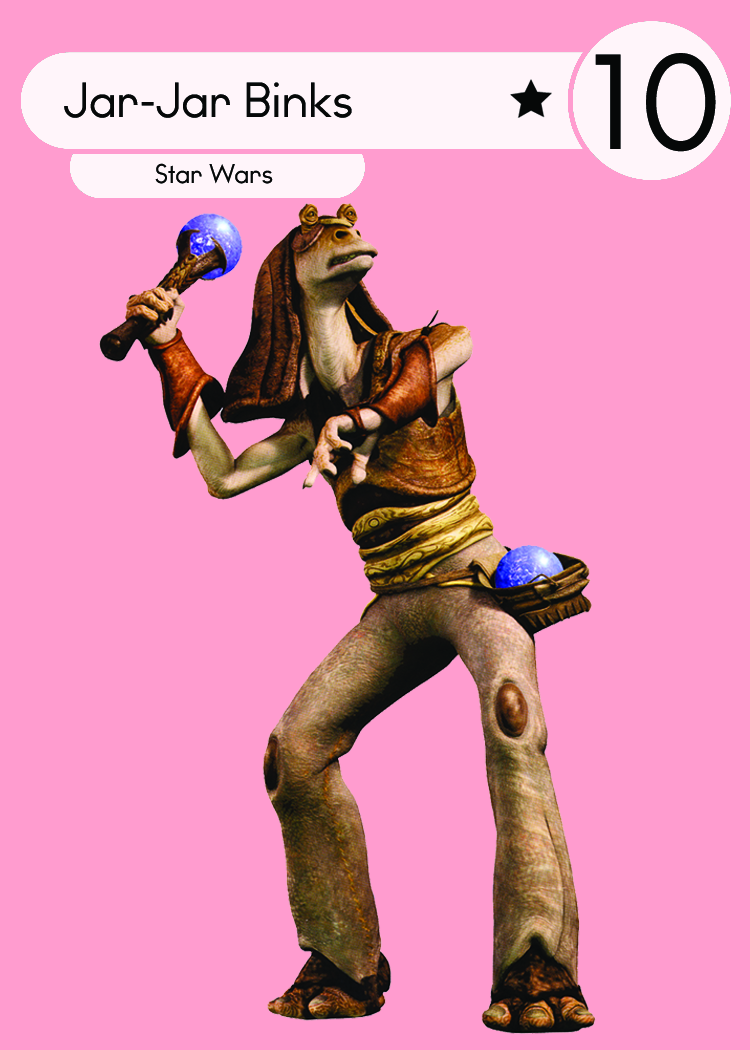
<style>
.page{position:relative;width:750px;height:1050px;background:#ff9ccf}
.page>*{position:absolute;margin:0}
.t1{font:127.3px "WatchwordRegularDemo";color:#060808}
.t2{font:46.7px "WatchwordRegularDemo";color:#060808}
.t3{font:25.5px "WatchwordRegularDemo";color:#060808}
</style>
<div class="page">
<p class="t1" style="left:595px;top:53px;width:121px;height:99px">10</p>
<p class="t2" style="left:64px;top:82px;width:288px;height:36px">Jar-Jar Binks</p>
<p class="t3" style="left:155px;top:163px;width:118px;height:21px">Star Wars</p>
</div>
